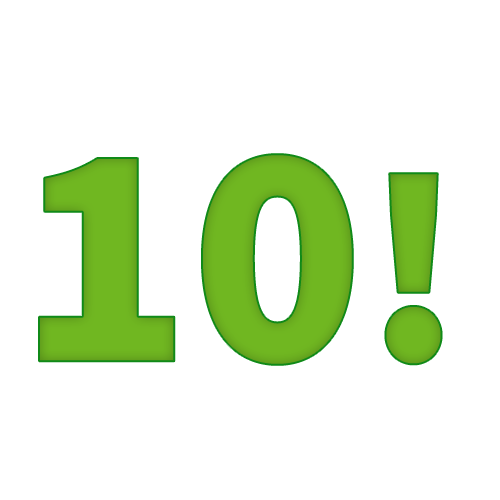
<style>
.page{position:relative;width:500px;height:500px;background:#ffffff}
.page>*{position:absolute;margin:0}
.t1{font:320px "SourceSansPro-Black";color:#70b721}
.t2{font:280px "SourceSansPro-Black";color:#70b721}
</style>
<div class="page">
<p class="t1" style="left:39px;top:154px;width:403px;height:211px">10<span class="t2">!</span></p>
</div>
